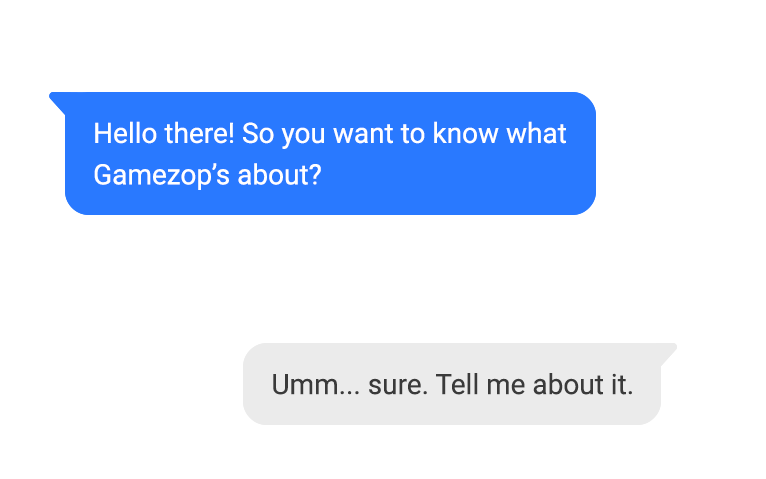
<style>
.page{position:relative;width:766px;height:479px;background:#ffffff}
.page>*{position:absolute;margin:0}
.t1{font:28px/40px "Roboto-Regular";color:#ffffff}
.t2{font:28px "Roboto-Regular";color:#3a3a3a}
</style>
<div class="page">
<p class="t1" style="left:94px;top:121px;width:472px;height:69px;text-align:right">Hello there! So you want to know what <br>Gamezop’s about?</p>
<p class="t2" style="left:273px;top:373px;width:359px;height:22px">Umm... sure. Tell me about it.</p>
</div>
